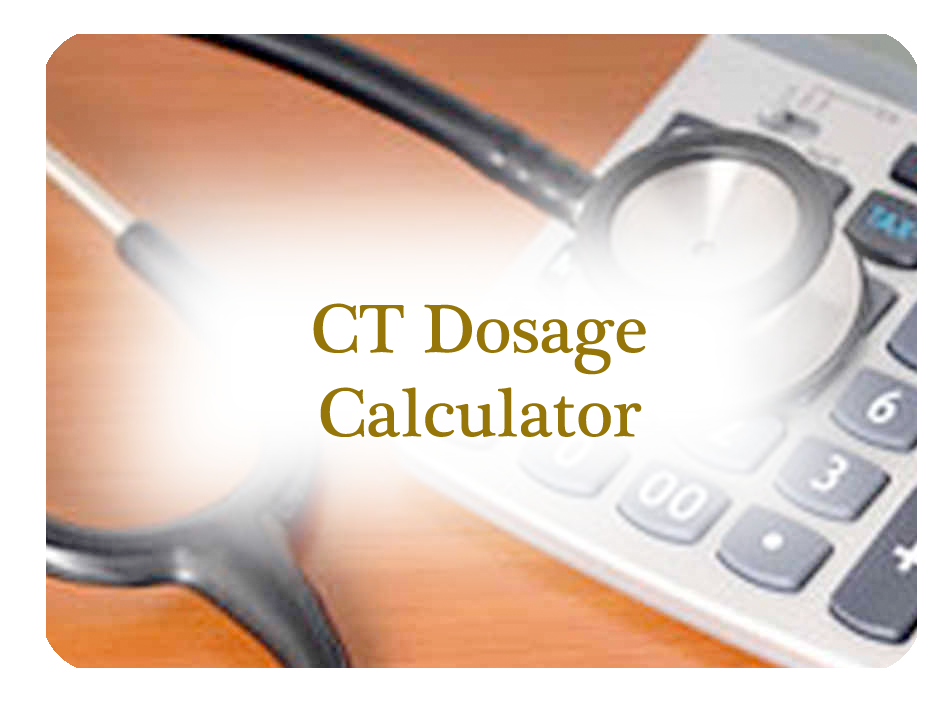
<style>
.page{position:relative;width:948px;height:711px;background:#ffffff}
.page>*{position:absolute;margin:0}
.t1{font:70px "PlantagenetCherokee";color:#967608}
</style>
<div class="page">
<p class="t1" style="left:313px;top:303px;width:333px;height:134px;text-align:center">CT Dosage <br>Calculator</p>
</div>
